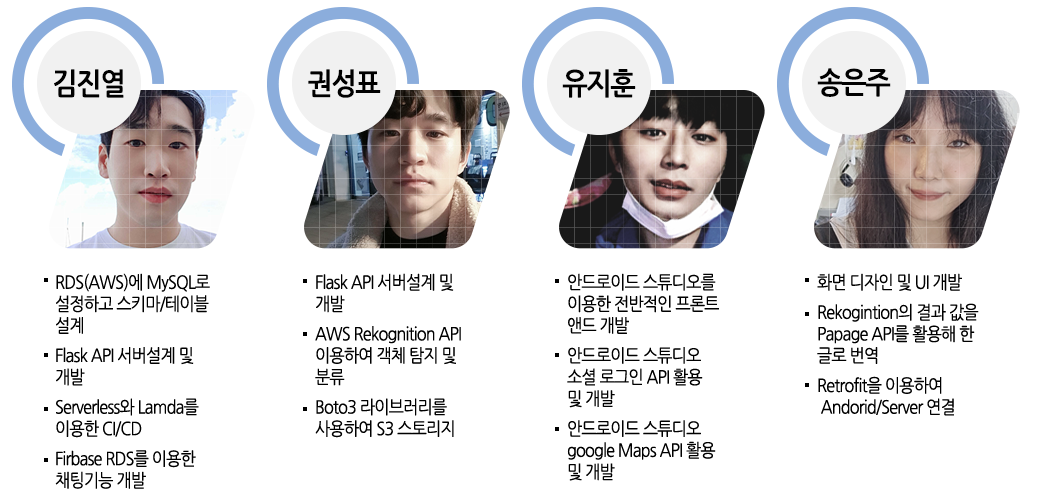
<style>
.page{position:relative;width:1040px;height:499px;background:#ffffff}
.page>*{position:absolute;margin:0}
.t1{font:30px "NanumGothicBold";letter-spacing:-0.05em;color:#000000;scale:0.9 1}
.t2{font:18px "NanumGothic";letter-spacing:-0.05em;color:#000000;scale:0.9 1}
.t3{font:18px/30px "NanumGothic";letter-spacing:-0.05em;color:#000000;scale:0.9 1}
</style>
<div class="page">
<p class="t1" style="left:54px;top:69px;width:70px;height:29px">김진열</p>
<p class="t1" style="left:308px;top:69px;width:73px;height:29px">권성표</p>
<p class="t1" style="left:562px;top:69px;width:74px;height:29px">유지훈</p>
<p class="t1" style="left:817px;top:68px;width:74px;height:29px">송은주</p>
<p class="t2" style="left:55px;top:273px;width:155px;height:216px">RDS(AWS)에 MySQL로<br>설정하고 스키마/테이블<br>설계<br><span class="t3">Flask API 서버설계 및<br></span>개발<br><span class="t3">Serverless와 Lamda를<br></span>이용한 CI/CD<br><span class="t3">Firbase RDS를 이용한<br></span>채팅기능 개발</p>
<p class="t2" style="left:315px;top:273px;width:146px;height:165px">Flask API 서버설계 및<br>개발<br><span class="t3">AWS Rekognition API<br></span>이용하여 객체 탐지 및<br>분류<br><span class="t3">Boto3 라이브러리를<br></span>사용하여 S3 스토리지</p>
<p class="t2" style="left:567px;top:273px;width:152px;height:208px">안드로이드 스튜디오를<br>이용한 전반적인 프론트<br>앤드 개발<br><span class="t3">안드로이드 스튜디오<br></span>소셜 로그인 API 활용<br>및 개발<br><span class="t3">안드로이드 스튜디오<br></span>google Maps API 활용<br>및 개발</p>
<p class="t2" style="left:817px;top:273px;width:162px;height:143px">화면 디자인 및 UI 개발<br><span class="t3">Rekogintion의 결과 값을<br></span>Papage API를 활용해 한<br>글로 번역<br><span class="t3">Retrofit을 이용하여<br></span> Andorid/Server 연결</p>
</div>
